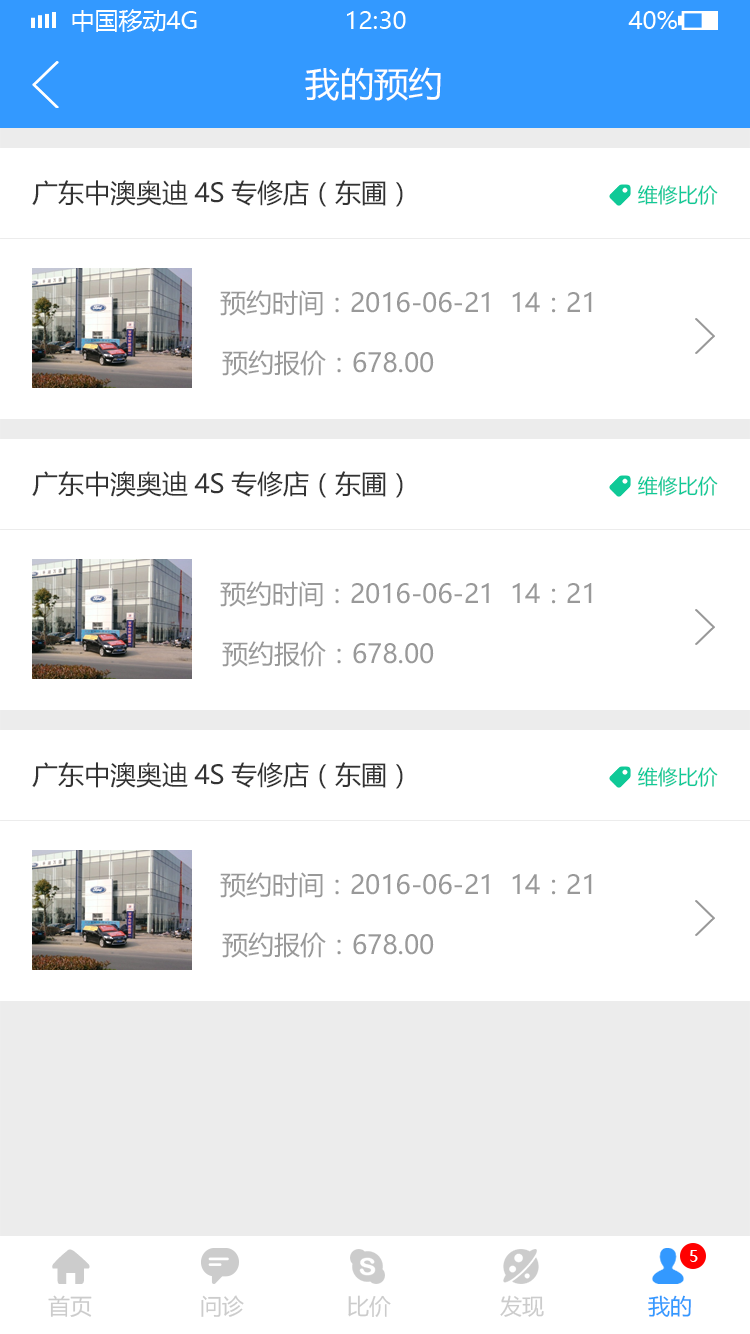
<style>
.page{position:relative;width:750px;height:1334px;background:#ffffff}
.page>*{position:absolute;margin:0}
.t1{font:34px "MicrosoftYaHei";color:#ffffff}
.t2{font:26px "MicrosoftYaHei";color:#333333}
.t3{font:20px "MicrosoftYaHei";color:#0fc997}
.t4{font:26px "MicrosoftYaHei";color:#999999}
.t5{font:16px "MicrosoftYaHei";color:#ffffff}
.t6{font:22px "MicrosoftYaHei";color:#cccccc}
.t7{font:22px "MicrosoftYaHei";color:#3399ff}
</style>
<div class="page">
<p class="t1" style="left:305px;top:67px;width:136px;height:34px">我的预约</p>
<p class="t2" style="left:32px;top:180px;width:371px;height:27px">广东中澳奥迪4S专修店（东圃）</p>
<p class="t3" style="left:638px;top:185px;width:80px;height:20px">维修比价</p>
<p class="t4" style="left:220px;top:290px;width:372px;height:26px">预约时间：2016-06-21  14：21</p>
<p class="t4" style="left:222px;top:350px;width:212px;height:26px">预约报价：678.00</p>
<p class="t2" style="left:32px;top:471px;width:371px;height:27px">广东中澳奥迪4S专修店（东圃）</p>
<p class="t3" style="left:638px;top:476px;width:80px;height:20px">维修比价</p>
<p class="t4" style="left:220px;top:581px;width:372px;height:26px">预约时间：2016-06-21  14：21</p>
<p class="t4" style="left:222px;top:641px;width:212px;height:26px">预约报价：678.00</p>
<p class="t2" style="left:32px;top:762px;width:371px;height:27px">广东中澳奥迪4S专修店（东圃）</p>
<p class="t3" style="left:638px;top:767px;width:80px;height:20px">维修比价</p>
<p class="t4" style="left:220px;top:872px;width:372px;height:26px">预约时间：2016-06-21  14：21</p>
<p class="t4" style="left:222px;top:932px;width:212px;height:26px">预约报价：678.00</p>
<p class="t5" style="left:690px;top:1250px;width:8px;height:12px">5</p>
<p class="t6" style="left:48px;top:1295px;width:44px;height:22px">首页</p>
<p class="t6" style="left:201px;top:1295px;width:43px;height:22px">问诊</p>
<p class="t6" style="left:348px;top:1295px;width:43px;height:22px">比价</p>
<p class="t6" style="left:500px;top:1295px;width:44px;height:22px">发现</p>
<p class="t7" style="left:648px;top:1295px;width:43px;height:22px">我的</p>
</div>
